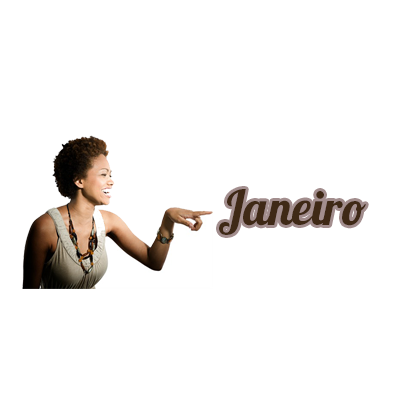
<style>
.page{position:relative;width:400px;height:400px;background:#ffffff}
.page>*{position:absolute;margin:0}
.t1{font:48px "Lobster1.4";color:#3f2916}
</style>
<div class="page">
<p class="t1" style="left:219px;top:189px;width:147px;height:46px">Janeiro</p>
</div>
